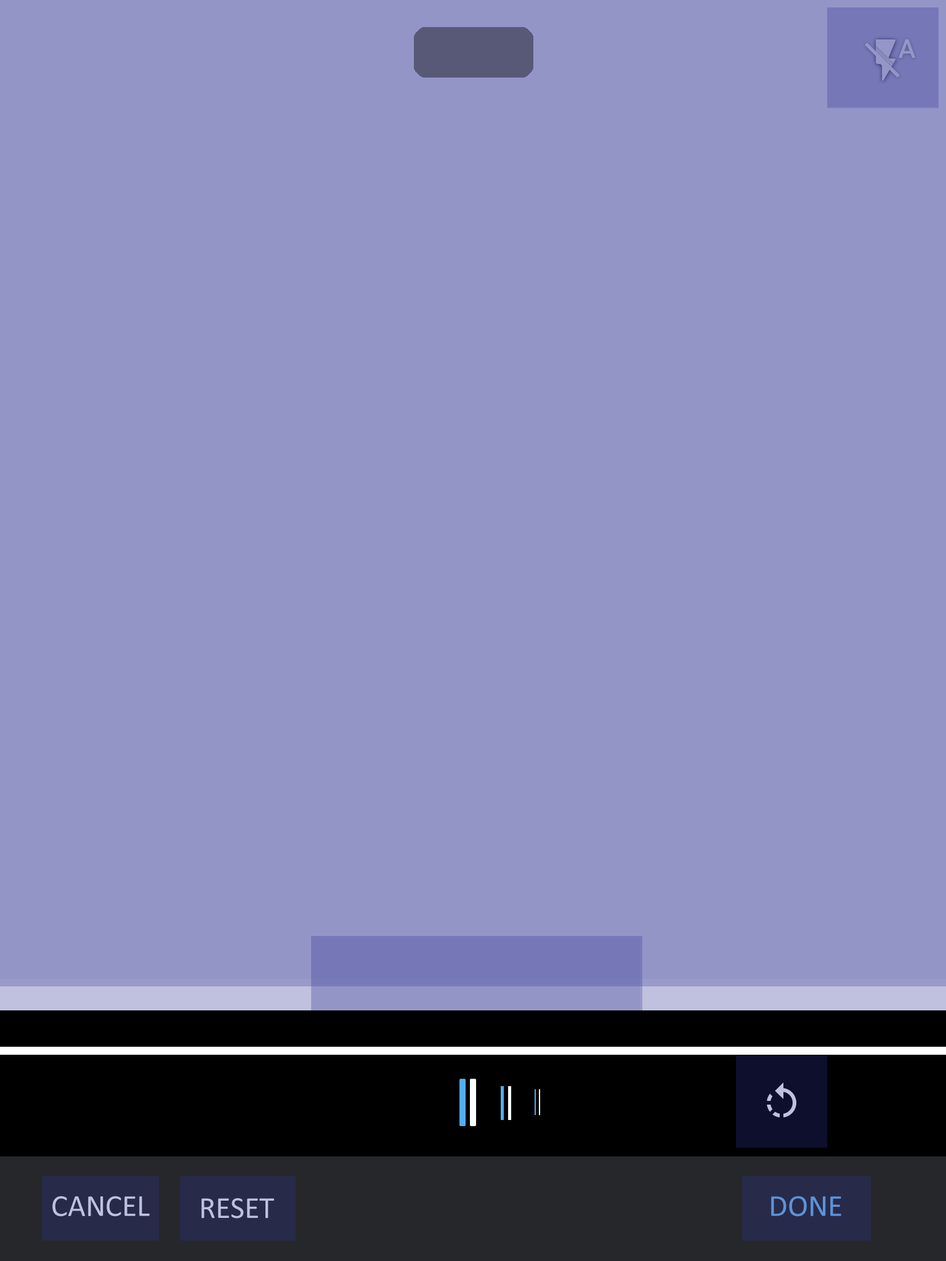
<style>
.page{position:relative;width:946px;height:1261px;background:#9495c7}
.page>*{position:absolute;margin:0}
.t1{font:30.8px "Calibri";color:#c0c1de}
.t2{font:30.8px "Calibri";color:#5c93da}
</style>
<div class="page">
<p class="t1" style="left:52px;top:1196px;width:98px;height:21px">CANCEL</p>
<p class="t1" style="left:201px;top:1198px;width:73px;height:20px">RESET</p>
<p class="t2" style="left:771px;top:1196px;width:70px;height:21px">DONE</p>
</div>
